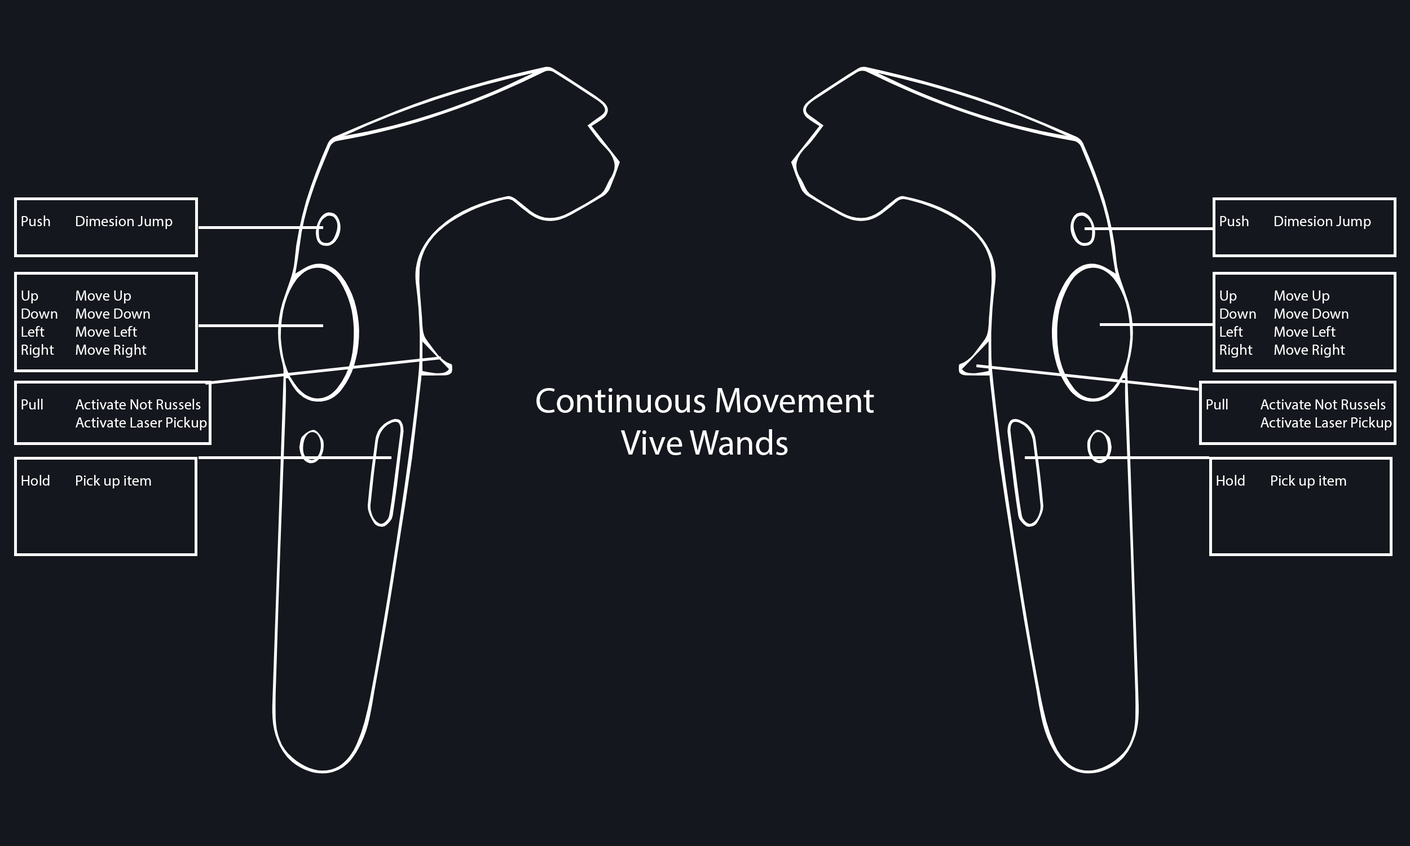
<style>
.page{position:relative;width:1410px;height:846px;background:#15171e}
.page>*{position:absolute;margin:0}
.t1{font:15px "MyriadPro-Regular";color:#ffffff}
.t2{font:35.4px "MyriadPro-Regular";color:#ffffff}
</style>
<div class="page">
<p class="t1" style="left:21px;top:215px;width:152px;height:14px">Push  Dimesion Jump</p>
<p class="t1" style="left:1220px;top:215px;width:151px;height:14px">Push  Dimesion Jump</p>
<p class="t1" style="left:21px;top:290px;width:129px;height:68px">Up    Move Up<br>  Down   Move Down<br>  Left    Move Left<br>  Right   Move Right</p>
<p class="t1" style="left:1220px;top:290px;width:128px;height:68px">Up    Move Up<br>  Down   Move Down<br>  Left    Move Left<br>  Right   Move Right</p>
<p class="t2" style="left:536px;top:388px;width:338px;height:67px;text-align:center">Continuous Movement<br>Vive Wands</p>
<p class="t1" style="left:21px;top:399px;width:186px;height:31px">Pull    Activate Not Russels<br>   Activate Laser Pickup</p>
<p class="t1" style="left:1206px;top:399px;width:186px;height:31px">Pull    Activate Not Russels<br>   Activate Laser Pickup</p>
<p class="t1" style="left:21px;top:475px;width:130px;height:13px">Hold   Pick up item</p>
<p class="t1" style="left:1216px;top:475px;width:130px;height:13px">Hold   Pick up item</p>
</div>
